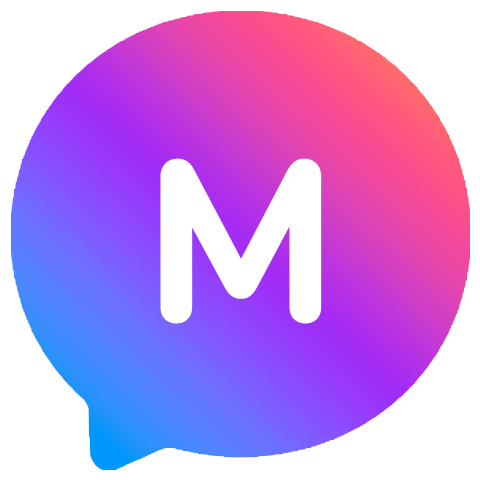
<style>
.page{position:relative;width:480px;height:480px;background:#ffffff}
.page>*{position:absolute;margin:0}
.t1{font:230px "Nunito-ExtraBold";color:#ffffff}
</style>
<div class="page">
<p class="t1" style="left:160px;top:158px;width:162px;height:166px">M</p>
</div>
